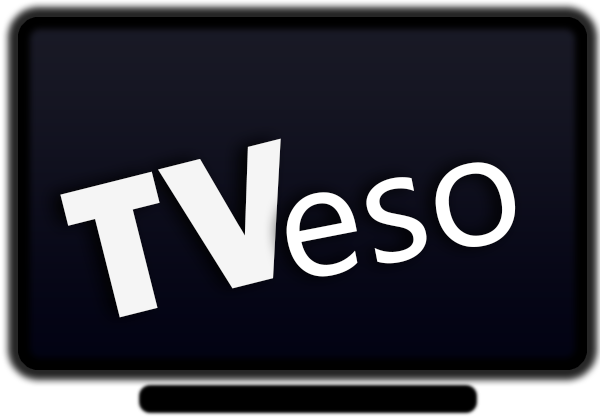
<style>
.page{position:relative;width:600px;height:420px}
.page>*{position:absolute;margin:0}
.t1{font:200px "FranklinGothic-Heavy";color:#ffffff}
.t2{font:160px "MyanmarText";color:#ffffff}
</style>
<div class="page">
<p class="t1" style="left:60px;top:138px;width:221px;height:180px;rotate:-14deg;opacity:0.94">TV</p>
<p class="t2" style="left:286px;top:162px;width:230px;height:115px;rotate:-11deg">eso</p>
</div>
